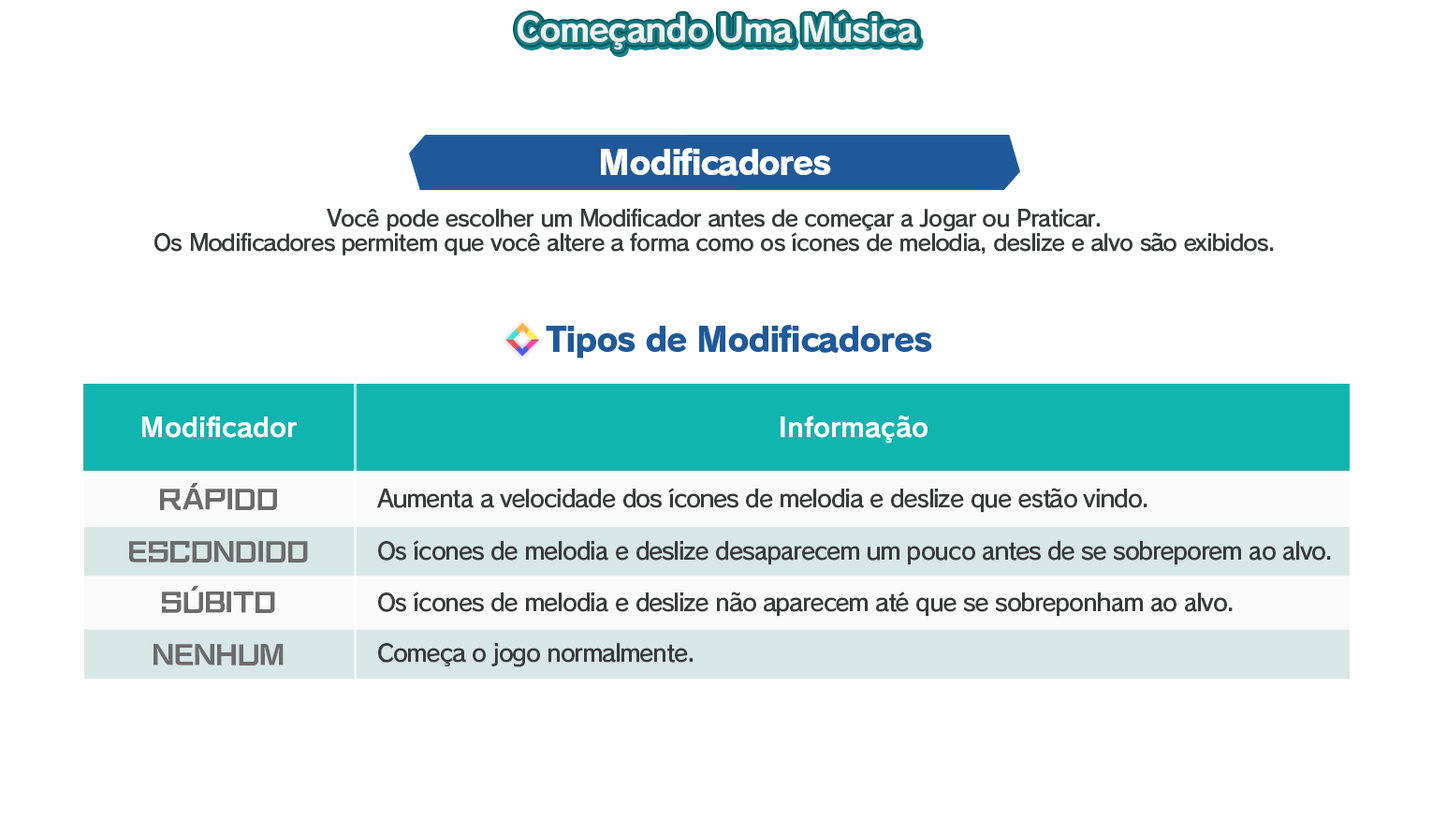
<style>
.page{position:relative;width:1432px;height:833px;background:#ffffff}
.page>*{position:absolute;margin:0}
.t1{font:33.7px "RodinPro-B";letter-spacing:-0.039em;color:#f2f2f3}
.t2{font:33.7px "RodinPro-EB";letter-spacing:-0.048em;color:#ffffff}
.t3{font:22.5px/23.7px "RodinPro-DB";letter-spacing:-0.04em;color:#383a3a}
.t4{font:33.7px "RodinPro-EB";letter-spacing:-0.04em;color:#1f599a}
.t5{font:26.2px "RodinPro-B";letter-spacing:-0.005em;color:#fbffff}
.t6{font:23.7px "KafuTechnoStd-U";letter-spacing:0.02em;color:#6c6b6c}
.t7{font:23.7px "RodinPro-DB";letter-spacing:-0.05em;color:#383a3a}
</style>
<div class="page">
<p class="t1" style="left:517px;top:14px;width:400px;height:36px">Começando Uma Música</p>
<p class="t2" style="left:601px;top:148px;width:230px;height:28px">Modificadores</p>
<p class="t3" style="left:154px;top:208px;width:1120px;height:47px;text-align:center">Você pode escolher um Modificador antes de começar a Jogar ou Praticar.<br>Os Modificadores permitem que você altere a forma como os ícones de melodia, deslize e alvo são exibidos.</p>
<p class="t4" style="left:546px;top:325px;width:386px;height:33px">Tipos de Modificadores</p>
<p class="t5" style="left:142px;top:415px;width:156px;height:23px">Modificador</p>
<p class="t5" style="left:780px;top:415px;width:147px;height:28px">Informação</p>
<p class="t6" style="left:160px;top:483px;width:117px;height:27px">RÁPIDO</p>
<p class="t7" style="left:377px;top:488px;width:770px;height:25px">Aumenta a velocidade dos ícones de melodia e deslize que estão vindo.</p>
<p class="t6" style="left:129px;top:541px;width:179px;height:21px">ESCONDIDO</p>
<p class="t7" style="left:378px;top:540px;width:953px;height:25px">Os ícones de melodia e deslize desaparecem um pouco antes de se sobreporem ao alvo.</p>
<p class="t6" style="left:162px;top:586px;width:113px;height:27px">SÚBITO</p>
<p class="t7" style="left:378px;top:591px;width:854px;height:26px">Os ícones de melodia e deslize não aparecem até que se sobreponham ao alvo.</p>
<p class="t6" style="left:153px;top:644px;width:131px;height:21px">NENHUM</p>
<p class="t7" style="left:378px;top:643px;width:314px;height:24px">Começa o jogo normalmente.</p>
</div>
